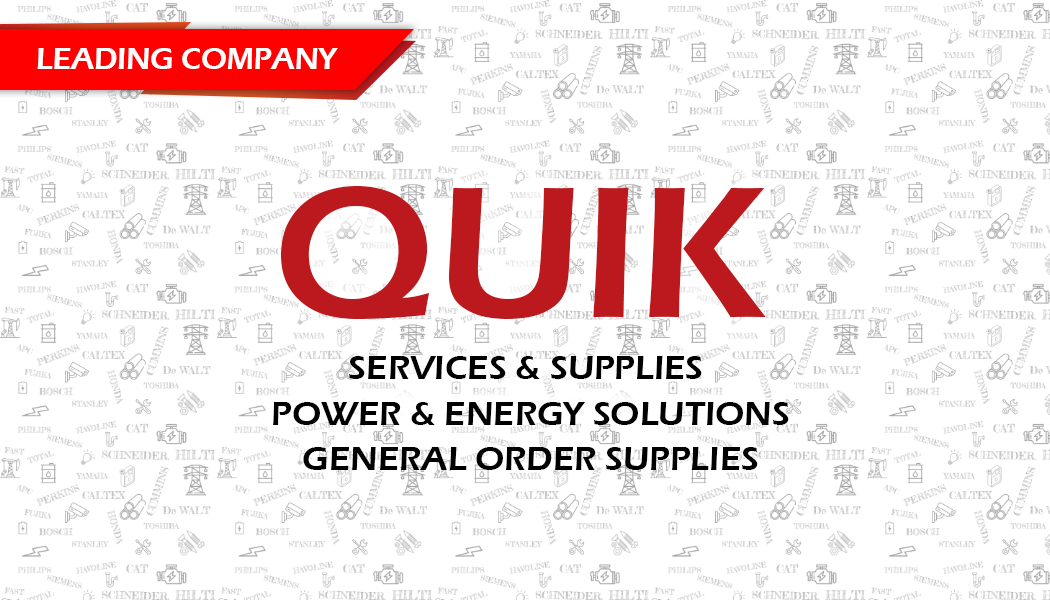
<style>
.page{position:relative;width:1050px;height:600px;background:#ffffff}
.page>*{position:absolute;margin:0}
.t1{font:30.6px "ErasITC-Demi";color:#fffefe}
.t2{font:193.1px "ErasITC-Demi";color:#bb191e}
.t3{font:35px "ErasITC-Demi";color:#000000}
.t4{font:35px/45.4px "ErasITC-Demi";color:#000000}
</style>
<div class="page">
<p class="t1" style="left:37px;top:48px;width:301px;height:21px">LEADING COMPANY</p>
<p class="t2" style="left:281px;top:186px;width:485px;height:133px">QUIK</p>
<p class="t3" style="left:349px;top:356px;width:353px;height:23px">SERVICES &amp; SUPPLIES</p>
<p class="t4" style="left:273px;top:402px;width:516px;height:68px;text-align:center">POWER &amp; ENERGY SOLUTIONS<br>GENERAL ORDER SUPPLIES</p>
</div>
